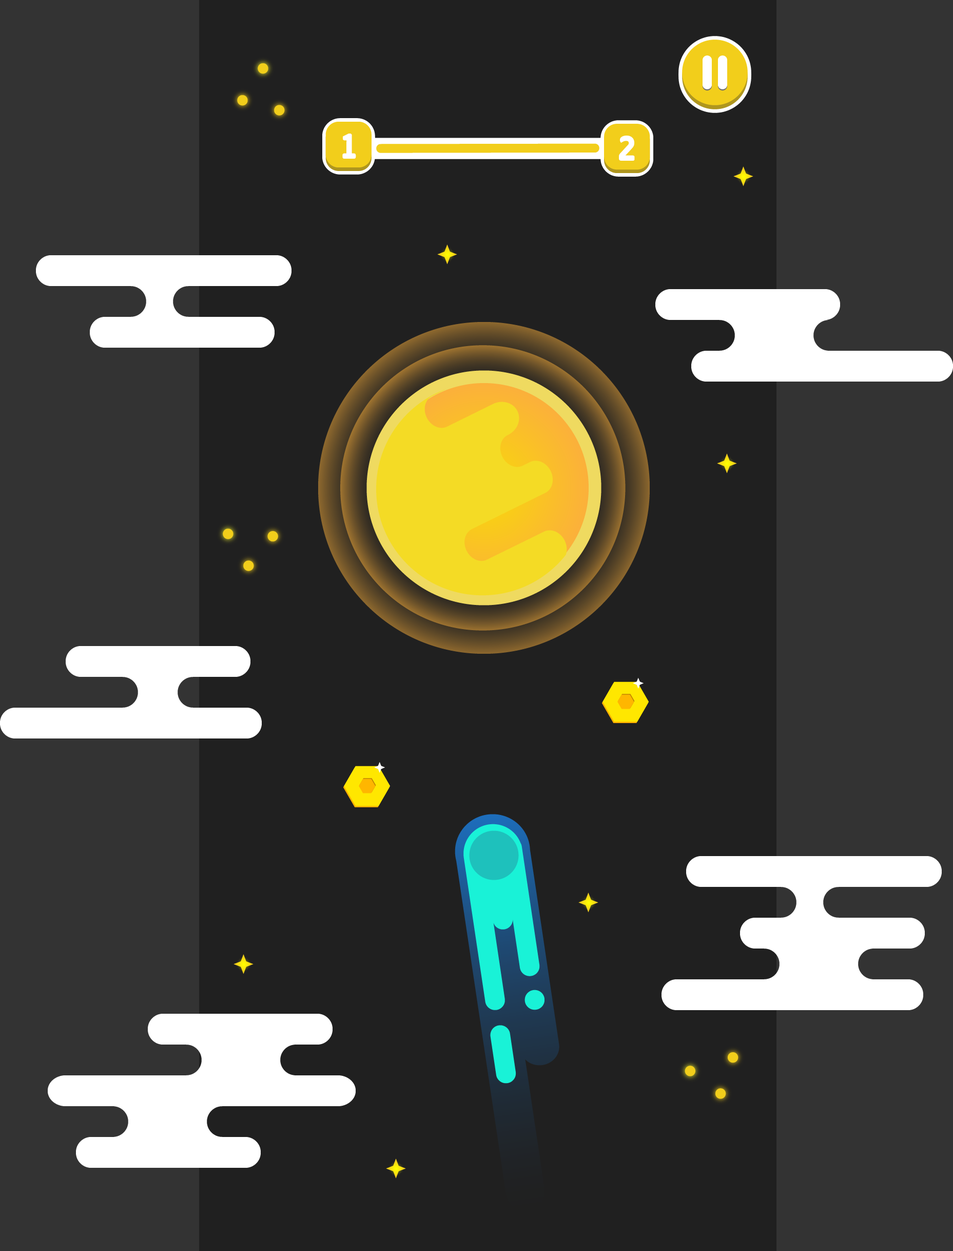
<style>
.page{position:relative;width:953px;height:1251px;background:#202020}
.page>*{position:absolute;margin:0}
.t1{font:35.1px "Fulbo-Argenta";color:#ffffff}
</style>
<div class="page">
<p class="t1" style="left:342px;top:133px;width:14px;height:26px">1</p>
<p class="t1" style="left:619px;top:136px;width:16px;height:25px">2</p>
</div>
